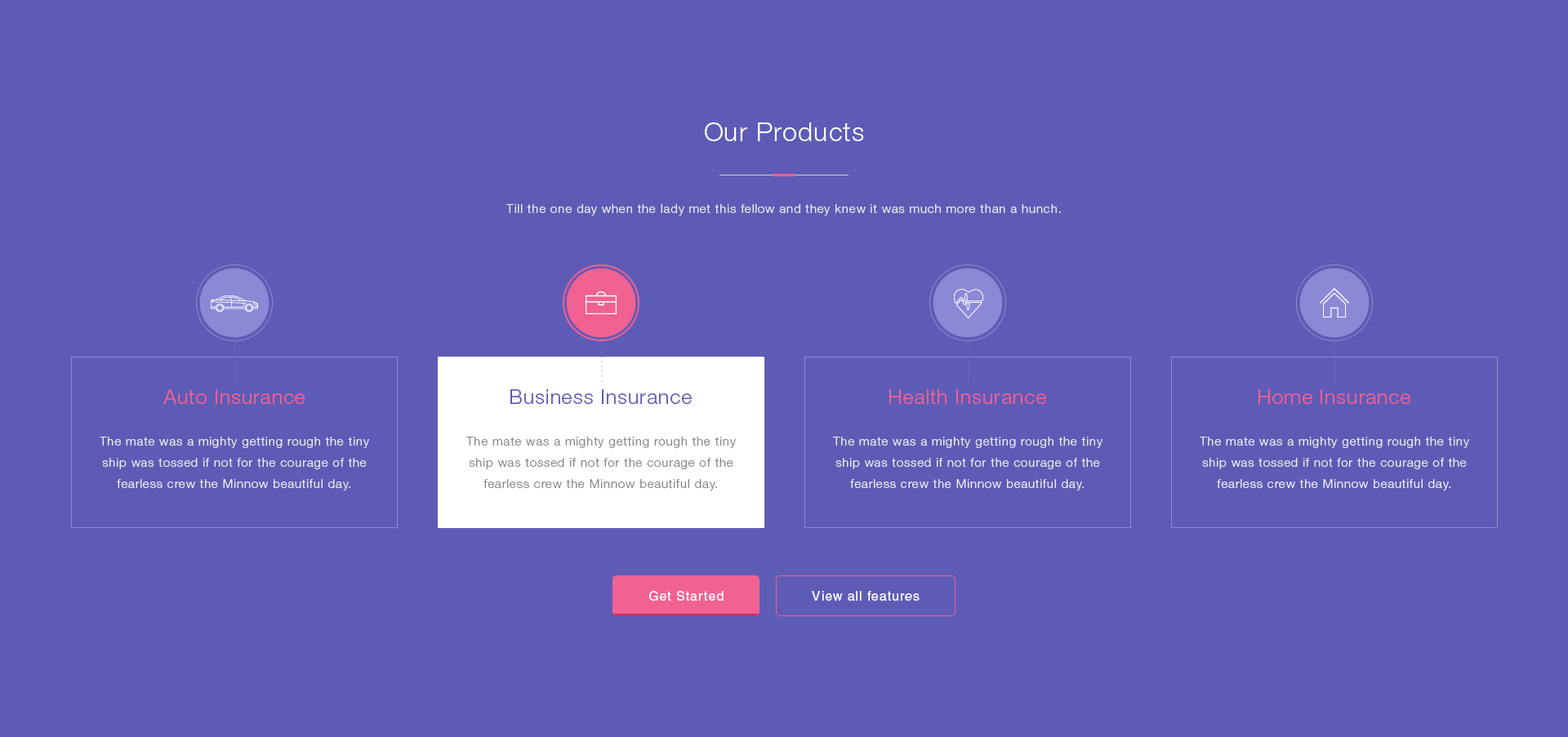
<style>
.page{position:relative;width:1568px;height:737px;background:#5e5bb6}
.page>*{position:absolute;margin:0}
.t1{font:26.1px "HelveticaNeueLTStd-Lt";letter-spacing:0.035em;color:#ffffff}
.t2{font:12.2px "HelveticaNeueLTStd-Lt";letter-spacing:0.06em;color:#e9e9e9}
.t3{font:13.1px "Roboto-Thin";letter-spacing:0.15em;color:#8885d9}
.t4{font:20.4px "HelveticaNeueLTStd-Lt";letter-spacing:0.035em;color:#f16192}
.t5{font:20.4px "HelveticaNeueLTStd-Lt";letter-spacing:0.035em;color:#5e5bb6}
.t6{font:12.2px/21.2px "HelveticaNeueLTStd-Lt";letter-spacing:0.06em;color:#e9e9e9}
.t7{font:12.2px/21.2px "HelveticaNeueLTStd-Lt";letter-spacing:0.06em;color:#888888}
.t8{font:13.1px "Helvetica";letter-spacing:0.06em;color:#ffffff}
</style>
<div class="page">
<p class="t1" style="left:705px;top:122px;width:159px;height:19px">Our Products</p>
<p class="t2" style="left:506px;top:204px;width:555px;height:12px">Till the one day when the lady met this fellow and they knew it was much more than a hunch.</p>
<p class="t3" style="left:234px;top:342px;width:2px;height:40px;rotate:90deg">.........</p>
<p class="t3" style="left:968px;top:342px;width:1px;height:40px;rotate:90deg">.........</p>
<p class="t3" style="left:1334px;top:342px;width:2px;height:40px;rotate:90deg">.........</p>
<p class="t4" style="left:163px;top:390px;width:142px;height:14px">Auto Insurance</p>
<p class="t5" style="left:510px;top:390px;width:182px;height:14px">Business Insurance</p>
<p class="t4" style="left:889px;top:390px;width:157px;height:14px">Health Insurance</p>
<p class="t4" style="left:1258px;top:390px;width:152px;height:14px">Home Insurance</p>
<p class="t6" style="left:100px;top:437px;width:269px;height:54px;text-align:center">The mate was a mighty getting rough the tiny ship was tossed if not for the courage of the fearless crew the Minnow beautiful day.</p>
<p class="t7" style="left:466px;top:437px;width:270px;height:54px;text-align:center">The mate was a mighty getting rough the tiny ship was tossed if not for the courage of the fearless crew the Minnow beautiful day.</p>
<p class="t6" style="left:833px;top:437px;width:269px;height:54px;text-align:center">The mate was a mighty getting rough the tiny ship was tossed if not for the courage of the fearless crew the Minnow beautiful day.</p>
<p class="t6" style="left:1200px;top:437px;width:269px;height:54px;text-align:center">The mate was a mighty getting rough the tiny ship was tossed if not for the courage of the fearless crew the Minnow beautiful day.</p>
<p class="t8" style="left:649px;top:591px;width:75px;height:10px">Get Started</p>
<p class="t8" style="left:812px;top:591px;width:108px;height:10px">View all features</p>
</div>
